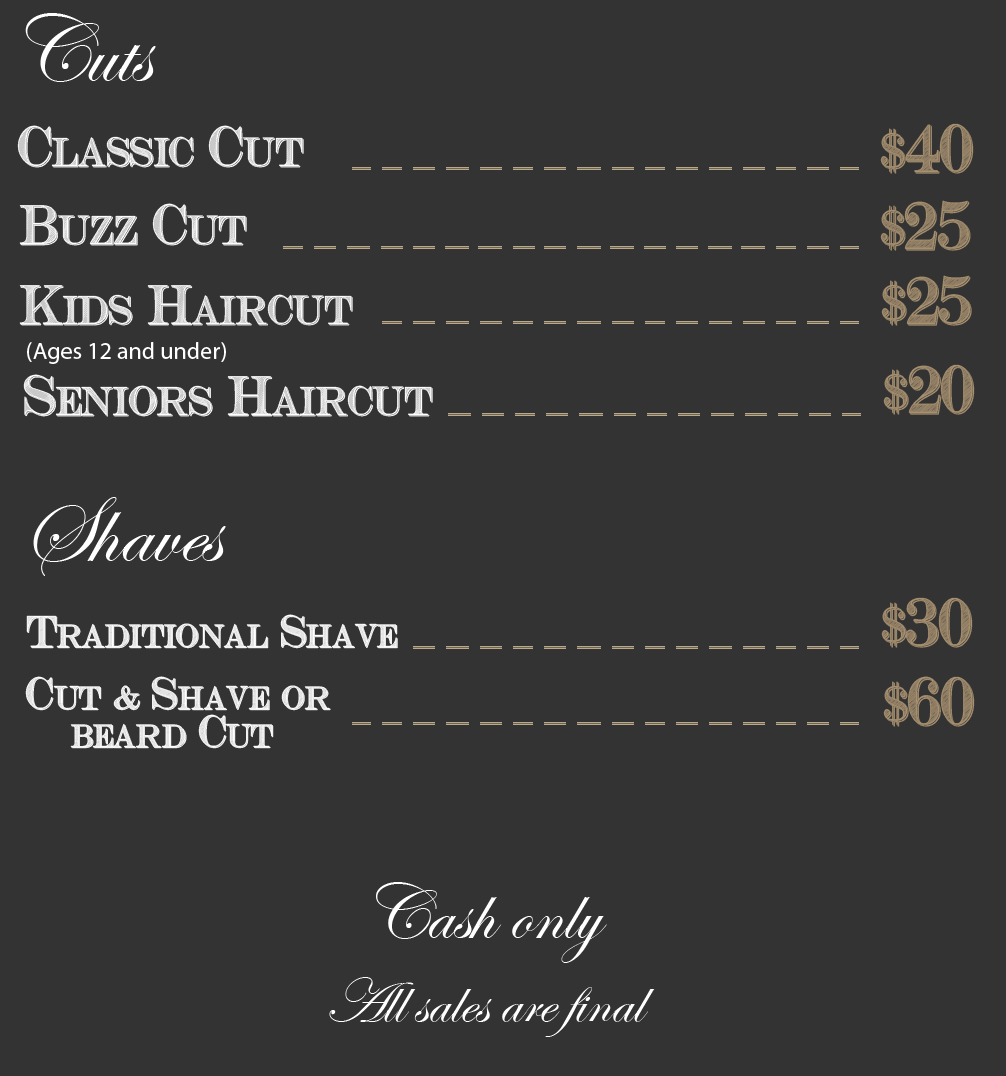
<style>
.page{position:relative;width:1006px;height:1076px;background:#333333}
.page>*{position:absolute;margin:0}
.t1{font:96px "EdwardianScriptITC";color:#ffffff}
.t2{font:40px "CashCurrency";color:#ffffff}
.t3{font:48px "CashCurrency";color:#a7906f}
.t4{font:40px "CashCurrency";color:#fbfbfb}
.t5{font:23.9px "MyriadPro-Regular";color:#ffffff}
.t6{font:32px "CashCurrency";color:#ffffff}
.t7{font:32px "CashCurrency";color:#fefefe}
.t8{font:64px "EdwardianScriptITC";color:#ffffff}
</style>
<div class="page">
<p class="t1" style="left:25px;top:13px;width:131px;height:69px">Cuts</p>
<p class="t2" style="left:17px;top:125px;width:287px;height:43px">Classic Cut</p>
<p class="t3" style="left:880px;top:123px;width:94px;height:51px">$40</p>
<p class="t2" style="left:19px;top:203px;width:228px;height:43px">Buzz Cut</p>
<p class="t3" style="left:880px;top:200px;width:91px;height:51px">$25</p>
<p class="t3" style="left:881px;top:275px;width:91px;height:51px">$25</p>
<p class="t4" style="left:19px;top:285px;width:334px;height:41px">Kids Haircut</p>
<p class="t5" style="left:27px;top:342px;width:199px;height:22px">(Ages 12 and under)</p>
<p class="t3" style="left:883px;top:364px;width:92px;height:51px">$20</p>
<p class="t2" style="left:23px;top:374px;width:410px;height:43px">Seniors Haircut</p>
<p class="t1" style="left:33px;top:497px;width:193px;height:79px">Shaves</p>
<p class="t3" style="left:881px;top:597px;width:92px;height:51px">$30</p>
<p class="t6" style="left:26px;top:614px;width:372px;height:35px">Traditional Shave</p>
<p class="t7" style="left:25px;top:676px;width:306px;height:73px;text-align:center">Cut &amp; Shave or <br>beard Cut</p>
<p class="t3" style="left:883px;top:676px;width:92px;height:51px">$60</p>
<p class="t8" style="left:329px;top:977px;width:326px;height:60px">All sales are final</p>
</div>
